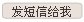
<style>
.page{position:relative;width:84px;height:22px;background:#eae1da}
.page>*{position:absolute;margin:0}
.t1{font:12px "SimSun";color:#3f3636}
</style>
<div class="page">
<p class="t1" style="left:12px;top:6px;width:59px;height:11px">发短信给我</p>
</div>
